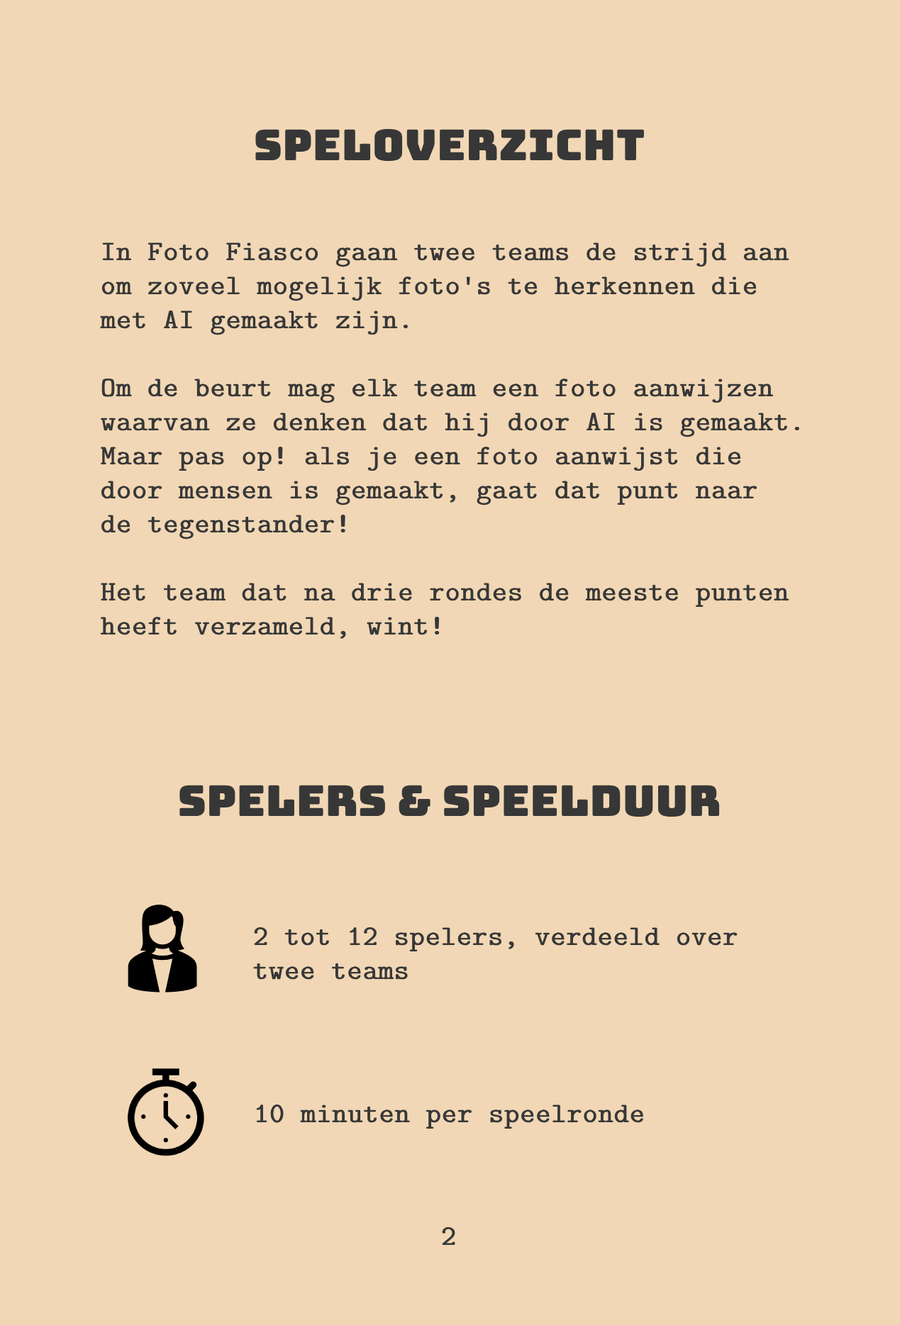
<style>
.page{position:relative;width:900px;height:1325px;background:#f1d7b5}
.page>*{position:absolute;margin:0}
.t1{font:42.5px "Bungee-Regular";color:#373737;font-weight:bold}
.t2{font:28.4px "CMUTypewriter-Regular";color:#373737;font-weight:bold}
</style>
<div class="page">
<p class="t1" style="left:255px;top:128px;width:389px;height:33px">Speloverzicht</p>
<p class="t2" style="left:100px;top:242px;width:699px;height:397px;text-align:justify">In Foto Fiasco gaan twee teams de strijd aan <br>om zoveel mogelijk foto's te herkennen die <br>met AI gemaakt zijn. <br><br>Om de beurt mag elk team een foto aanwijzen <br>waarvan ze denken dat hij door AI is gemaakt. <br>Maar pas op! als je een foto aanwijst die <br>door mensen is gemaakt, gaat dat punt naar <br>de tegenstander! <br><br>Het team dat na drie rondes de meeste punten <br>heeft verzameld, wint!</p>
<p class="t1" style="left:179px;top:785px;width:541px;height:32px">Spelers &amp; Speelduur</p>
<p class="t2" style="left:253px;top:927px;width:484px;height:53px;text-align:justify">2 tot 12 spelers, verdeeld over <br>twee teams</p>
<p class="t2" style="left:256px;top:1105px;width:387px;height:24px">10 minuten per speelronde</p>
<p class="t2" style="left:442px;top:1227px;width:13px;height:18px">2</p>
</div>
